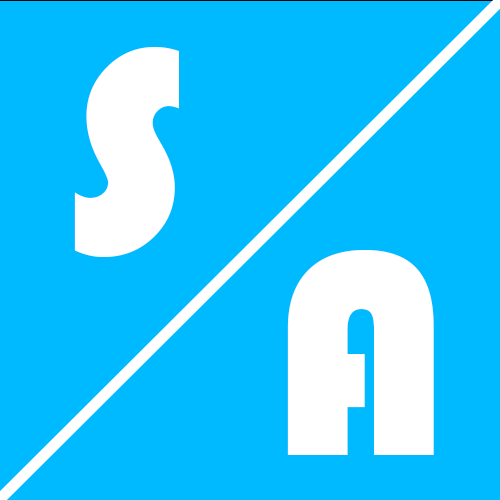
<style>
.page{position:relative;width:500px;height:500px;background:#00baff}
.page>*{position:absolute;margin:0}
.t1{font:300px "Bauhaus93";color:#ffffff}
</style>
<div class="page">
<p class="t1" style="left:74px;top:47px;width:105px;height:210px">S</p>
<p class="t1" style="left:287px;top:250px;width:147px;height:205px">A</p>
</div>
